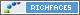
<style>
.page{position:relative;width:80px;height:15px;background:#519ad7}
.page>*{position:absolute;margin:0}
.t1{font:8px "PixelSix02";color:#feffff}
</style>
<div class="page">
<p class="t1" style="left:31px;top:5px;width:40px;height:5px">RICHFACES</p>
</div>
